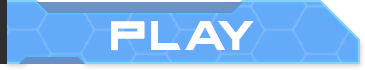
<style>
.page{position:relative;width:365px;height:70px;background:#63aaf9}
.page>*{position:absolute;margin:0}
.t1{font:45.3px "QORE";color:#ffffff}
</style>
<div class="page">
<p class="t1" style="left:111px;top:21px;width:143px;height:30px">PLAY</p>
</div>
